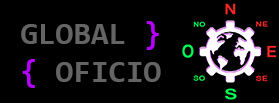
<style>
.page{position:relative;width:279px;height:103px;background:#000000}
.page>*{position:absolute;margin:0}
.t1{font:31.9px "Consolas-Bold";color:#646464}
.t2{font:31.9px "Consolas-Bold";color:#b400ff}
</style>
<div class="page">
<p class="t1" style="left:21px;top:21px;width:140px;height:67px">GLOBAL <span class="t2">}<br>{</span> OFICIO</p>
</div>
